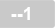
<style>
.page{position:relative;width:55px;height:28px;background:#c9c9c9}
.page>*{position:absolute;margin:0}
.t1{font:18.2px "Arial-BoldMT";color:#ffffff}
</style>
<div class="page">
<p class="t1" style="left:11px;top:7px;width:19px;height:13px">--1</p>
</div>
